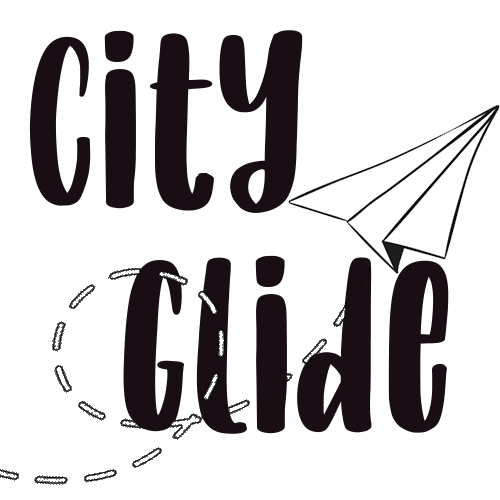
<style>
.page{position:relative;width:500px;height:500px;background:#ffffff}
.page>*{position:absolute;margin:0}
.t1{font:250px/225px "HolidayInParisRegular";color:#1a0e15}
.t2{font:250px/316.7px "HolidayInParisRegular";color:#1a0e15}
</style>
<div class="page">
<p class="t1" style="left:29px;top:30px;width:420px;height:404px;text-align:center"><span class="t2">City<br>     </span>Glide</p>
</div>
